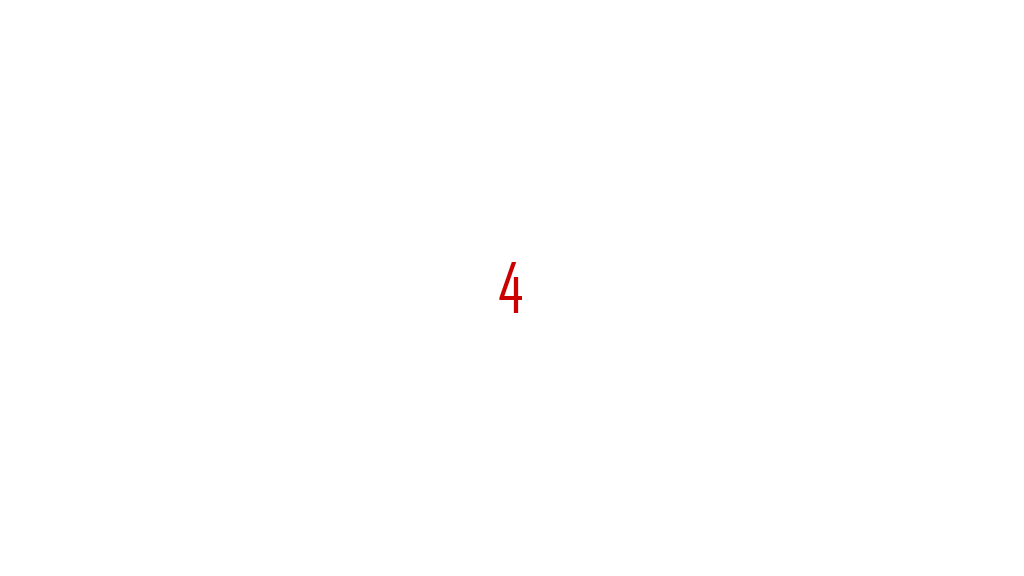
<style>
.page{position:relative;width:1024px;height:576px;background:#ffffff}
.page>*{position:absolute;margin:0}
.t1{font:66.7px "AgencyFB-Reg";color:#cb0000}
</style>
<div class="page">
<p class="t1" style="left:499px;top:262px;width:23px;height:51px">4</p>
</div>
